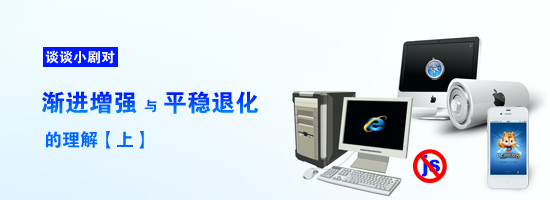
<style>
.page{position:relative;width:550px;height:200px}
.page>*{position:absolute;margin:0}
.t1{font:14px "FZDHTJW--GB1-0";color:#ffffff}
.t2{font:24px "FZDHTJW--GB1-0"}
.t3{font:14px "FZDHTJW--GB1-0";letter-spacing:-0.1em}
.t4{font:18px "FZDHTJW--GB1-0";color:#0066ff}
.t5{font:24px "FZDHTJW--GB1-0";color:#0018ff}
</style>
<div class="page">
<p class="t1" style="left:45px;top:50px;width:70px;height:14px">谈谈小剧对</p>
<p class="t2" style="left:42px;top:91px;width:216px;height:23px">渐进增强 <span class="t3">与</span> 平稳退化</p>
<p class="t4" style="left:46px;top:131px;width:98px;height:18px">的理解【上】</p>
<p class="t5" style="left:422px;top:154px;width:18px;height:23px">js</p>
</div>
